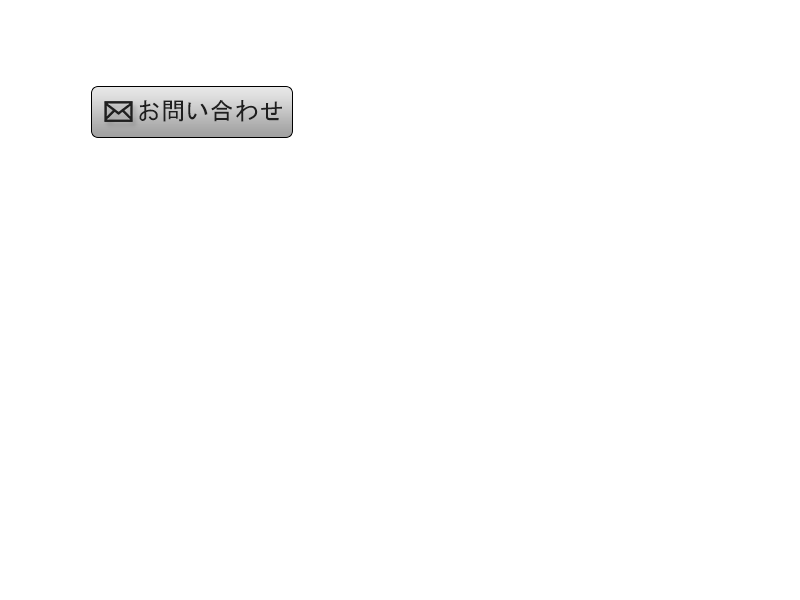
<style>
.page{position:relative;width:800px;height:600px;background:#ffffff}
.page>*{position:absolute;margin:0}
.t1{font:24px "MS-PGothic";letter-spacing:0.04em;color:#1e1e1e}
</style>
<div class="page">
<p class="t1" style="left:139px;top:100px;width:143px;height:22px">お問い合わせ</p>
</div>
